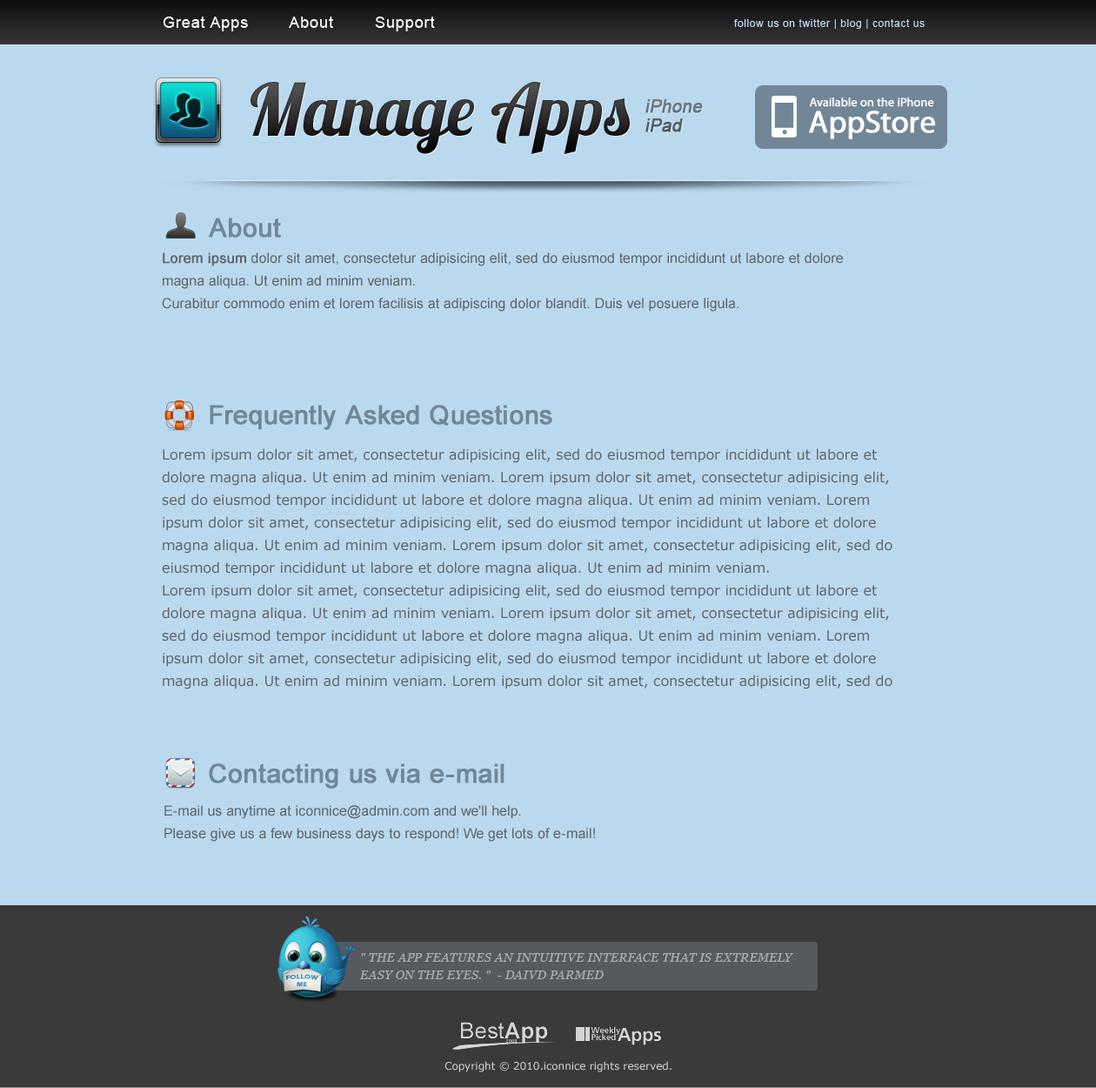
<style>
.page{position:relative;width:1096px;height:1088px;background:#bad9ef}
.page>*{position:absolute;margin:0}
.t1{font:15.7px "ArialMT";letter-spacing:0.05em;color:#ffffff}
.t2{font:10.4px "ArialMT";letter-spacing:0.05em;color:#bad9ef}
.t3{font:72px "Lobster1.2";color:#292828}
.t4{font:17.4px/19.1px "ArialMT";color:#647079;font-weight:bold;font-style:italic}
.t5{font:12.2px "MyriadPro-Regular";letter-spacing:-0.005em;color:#ffffff;font-weight:bold}
.t6{font:31.7px "MyriadPro-Regular";letter-spacing:-0.005em;color:#ffffff;font-weight:bold}
.t7{font:26.1px "ArialMT";letter-spacing:0.01em;color:#718797;font-weight:bold}
.t8{font:13.9px/22.6px "ArialMT";letter-spacing:0.01em;color:#626669}
.t9{font:13.9px/22.6px "ArialMT";letter-spacing:0.01em;color:#626669;font-weight:bold}
.t10{font:13.9px/22.6px "Verdana";color:#626669}
.t11{font:12.2px/17.4px "Georgia-Italic";letter-spacing:0.025em;color:#aaadaf;text-transform:uppercase}
.t12{font:10.4px "Verdana";color:#cbcbcb}
</style>
<div class="page">
<p class="t1" style="left:163px;top:17px;width:272px;height:14px">Great Apps        About        Support</p>
<p class="t2" style="left:734px;top:19px;width:191px;height:10px">follow us on twitter | blog | contact us</p>
<p class="t3" style="left:251px;top:82px;width:379px;height:72px">Manage Apps</p>
<p class="t4" style="left:646px;top:99px;width:57px;height:33px">iPhone<br>iPad</p>
<p class="t5" style="left:809px;top:97px;width:126px;height:10px">Available on the iPhone</p>
<p class="t6" style="left:809px;top:111px;width:126px;height:28px">AppStore</p>
<p class="t7" style="left:209px;top:218px;width:72px;height:20px">About</p>
<p class="t8" style="left:162px;top:252px;width:681px;height:60px"><span class="t9">Lorem ipsum</span> dolor sit amet, consectetur adipisicing elit, sed do eiusmod tempor incididunt ut labore et dolore magna aliqua. Ut enim ad minim veniam.<br>Curabitur commodo enim et lorem facilisis at adipiscing dolor blandit. Duis vel posuere ligula.</p>
<p class="t7" style="left:210px;top:405px;width:343px;height:25px">Frequently Asked Questions</p>
<p class="t10" style="left:162px;top:448px;width:731px;height:241px">Lorem ipsum dolor sit amet, consectetur adipisicing elit, sed do eiusmod tempor incididunt ut labore et dolore magna aliqua. Ut enim ad minim veniam. Lorem ipsum dolor sit amet, consectetur adipisicing elit, sed do eiusmod tempor incididunt ut labore et dolore magna aliqua. Ut enim ad minim veniam. Lorem ipsum dolor sit amet, consectetur adipisicing elit, sed do eiusmod tempor incididunt ut labore et dolore magna aliqua. Ut enim ad minim veniam. Lorem ipsum dolor sit amet, consectetur adipisicing elit, sed do eiusmod tempor incididunt ut labore et dolore magna aliqua. Ut enim ad minim veniam.<br>Lorem ipsum dolor sit amet, consectetur adipisicing elit, sed do eiusmod tempor incididunt ut labore et dolore magna aliqua. Ut enim ad minim veniam. Lorem ipsum dolor sit amet, consectetur adipisicing elit, sed do eiusmod tempor incididunt ut labore et dolore magna aliqua. Ut enim ad minim veniam. Lorem ipsum dolor sit amet, consectetur adipisicing elit, sed do eiusmod tempor incididunt ut labore et dolore magna aliqua. Ut enim ad minim veniam. Lorem ipsum dolor sit amet, consectetur adipisicing elit, sed do eiusmod tempor incididunt ut labore et dolore magna aliqua. Ut enim ad minim veniam.</p>
<p class="t7" style="left:209px;top:763px;width:296px;height:25px">Contacting us via e-mail</p>
<p class="t8" style="left:164px;top:805px;width:431px;height:36px">E-mail us anytime at iconnice@admin.com and we'll help.<br>Please give us a few business days to respond! We get lots of e-mail!</p>
<p class="t11" style="left:359px;top:953px;width:435px;height:26px">" The app features an intuitive interface that is extremely easy on the eyes. "  - Daivd parmed</p>
<p class="t12" style="left:445px;top:1061px;width:227px;height:11px">Copyright © 2010.iconnice rights reserved.</p>
</div>
